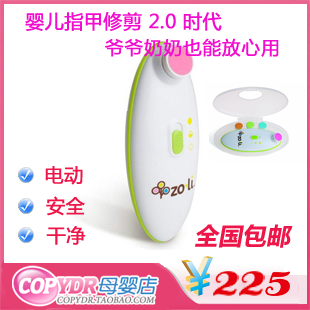
<style>
.page{position:relative;width:310px;height:310px;background:#ffffff}
.page>*{position:absolute;margin:0}
.t1{font:19px "MicrosoftYaHei";color:#f20ccf;font-weight:bold}
.t2{font:19px "FZLTHK--GBK1-0";color:#f20ccf;font-weight:bold}
.t3{font:19px "MicrosoftYaHei";color:#ee1548;font-weight:bold}
.t4{font:24px "MicrosoftYaHei-Bold";color:#ee1548;text-transform:uppercase;font-style:italic}
</style>
<div class="page">
<p class="t1" style="left:25px;top:12px;width:197px;height:19px">婴儿指甲修剪 2.0 时代</p>
<p class="t2" style="left:105px;top:38px;width:174px;height:19px">爷爷奶奶也能放心用</p>
<p class="t3" style="left:45px;top:166px;width:38px;height:19px">电动</p>
<p class="t3" style="left:46px;top:196px;width:39px;height:20px">安全</p>
<p class="t3" style="left:46px;top:226px;width:40px;height:19px">干净</p>
<p class="t4" style="left:195px;top:224px;width:98px;height:24px">全国包邮</p>
</div>
